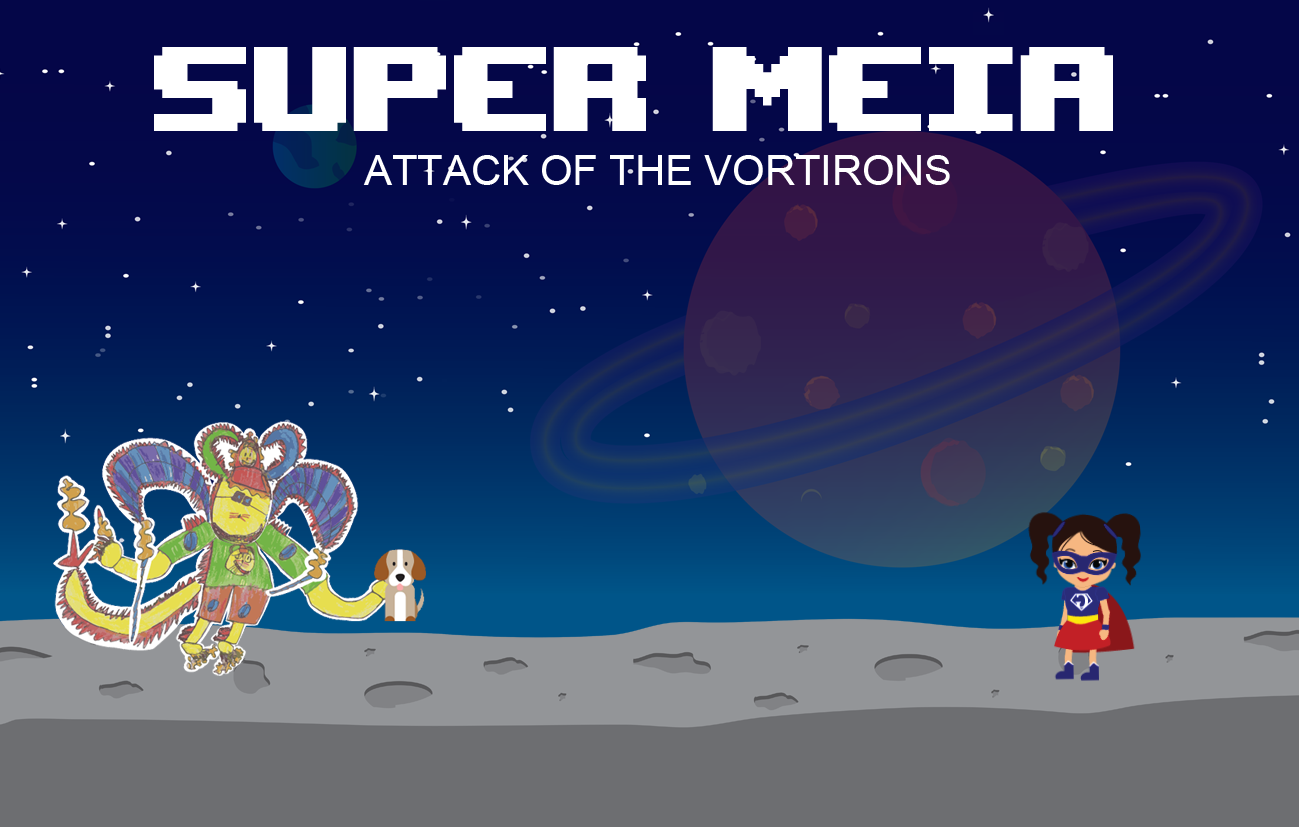
<style>
.page{position:relative;width:1299px;height:827px}
.page>*{position:absolute;margin:0}
.t1{font:166.7px "UpheavalTT-BRK-";color:#ffffff}
.t2{font:41.7px "ArialMT";color:#ffffff}
</style>
<div class="page">
<p class="t1" style="left:154px;top:47px;width:959px;height:84px">Super Meia</p>
<p class="t2" style="left:363px;top:155px;width:587px;height:30px">ATTACK OF THE VORTIRONS</p>
</div>
